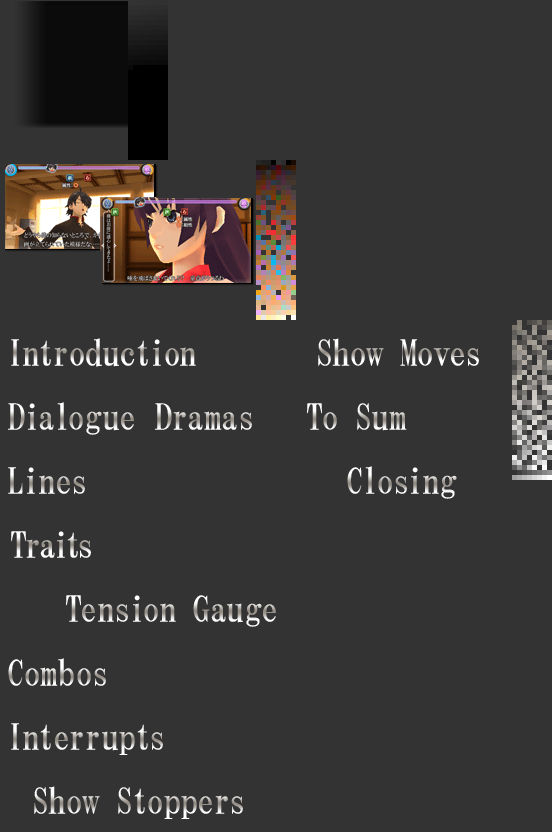
<style>
.page{position:relative;width:552px;height:832px;background:#333333}
.page>*{position:absolute;margin:0}
.t1{font:36px "HGMinchoB";letter-spacing:-0.025em}
.t2{font:36px "HGMinchoB";letter-spacing:-0.075em}
</style>
<div class="page">
<p class="t1" style="left:11px;top:338px;width:468px;height:29px">Introduction       Show Moves</p>
<p class="t1" style="left:8px;top:402px;width:399px;height:33px">Dialogue Dramas   To Sum</p>
<p class="t1" style="left:8px;top:466px;width:449px;height:33px">Lines          Closing</p>
<p class="t2" style="left:11px;top:531px;width:80px;height:27px">Traits</p>
<p class="t1" style="left:66px;top:595px;width:210px;height:32px">Tension Gauge</p>
<p class="t1" style="left:8px;top:658px;width:98px;height:28px">Combos</p>
<p class="t1" style="left:11px;top:723px;width:152px;height:32px">Interrupts</p>
<p class="t1" style="left:34px;top:786px;width:209px;height:33px">Show Stoppers</p>
</div>
